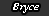
<style>
.page{position:relative;width:49px;height:16px;background:#333333}
.page>*{position:absolute;margin:0}
.t1{font:14px "Vijaya-Bold";color:#ffffff}
</style>
<div class="page">
<p class="t1" style="left:13px;top:3px;width:26px;height:10px">Bryce</p>
</div>
